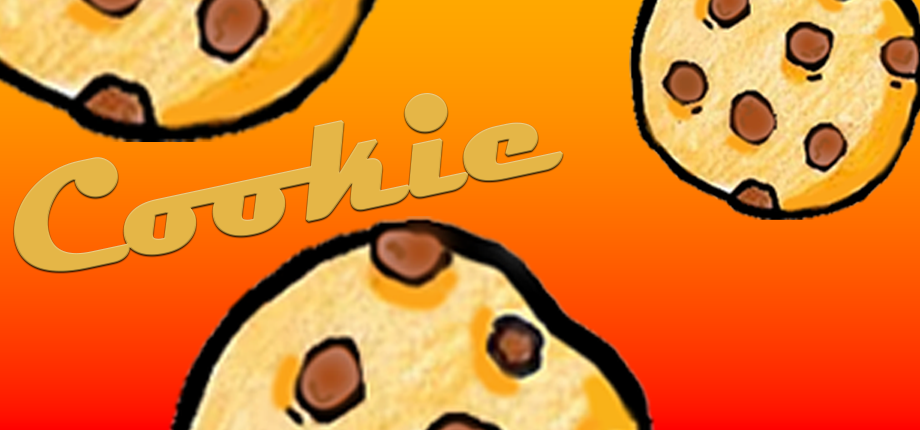
<style>
.page{position:relative;width:920px;height:430px}
.page>*{position:absolute;margin:0}
.t1{font:150px "Magneto-Bold";color:#e5b647;font-weight:bold}
</style>
<div class="page">
<p class="t1" style="left:13px;top:93px;width:550px;height:179px;rotate:-12deg">Cookie</p>
</div>
